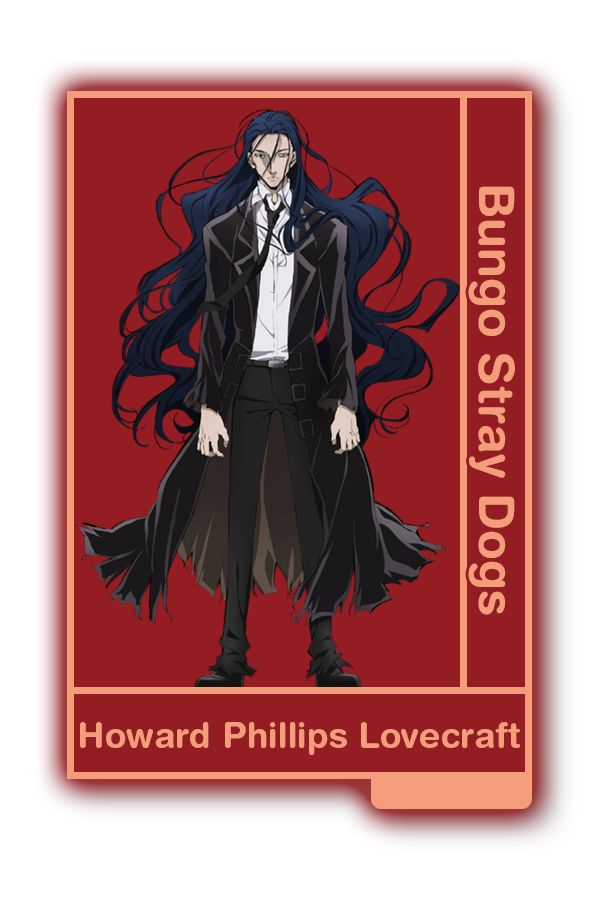
<style>
.page{position:relative;width:600px;height:900px;background:#941d23}
.page>*{position:absolute;margin:0}
.t1{font:48.8px "HelveticaRounded-Bold";color:#f39d7b}
.t2{font:35.2px "HelveticaRounded-Bold";color:#f39d7b}
</style>
<div class="page">
<p class="t1" style="left:468px;top:186px;width:47px;height:429px;rotate:90deg">Bungo Stray Dogs</p>
<p class="t2" style="left:80px;top:722px;width:440px;height:33px">Howard Phillips Lovecraft</p>
</div>
